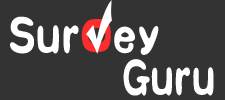
<style>
.page{position:relative;width:225px;height:100px;background:#333333}
.page>*{position:absolute;margin:0}
.t1{font:41.6px "ç»å¸è¶£ä½ç®-regular";color:#ffffff;scale:0.77 1}
.t2{font:41.6px "ç»å¸è¶£ä½ç®-regular";color:#fe2d2d;scale:0.77 1}
.t3{font:41.6px "ç»å¸è¶£ä½ç®-regular";color:#fefefe;scale:0.72 1}
</style>
<div class="page">
<p class="t1" style="left:10px;top:16px;width:149px;height:39px">Sur<span class="t2">口</span>ey</p>
<p class="t3" style="left:123px;top:59px;width:91px;height:37px">Guru</p>
</div>
